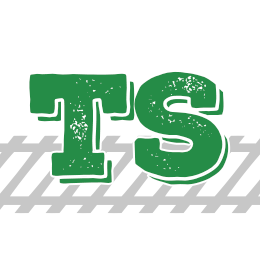
<style>
.page{position:relative;width:260px;height:260px;background:#ffffff}
.page>*{position:absolute;margin:0}
.t1{font:140px "NexaRustSlab-BlackShadow01";color:#258c47}
</style>
<div class="page">
<p class="t1" style="left:29px;top:71px;width:200px;height:114px">TS</p>
</div>
